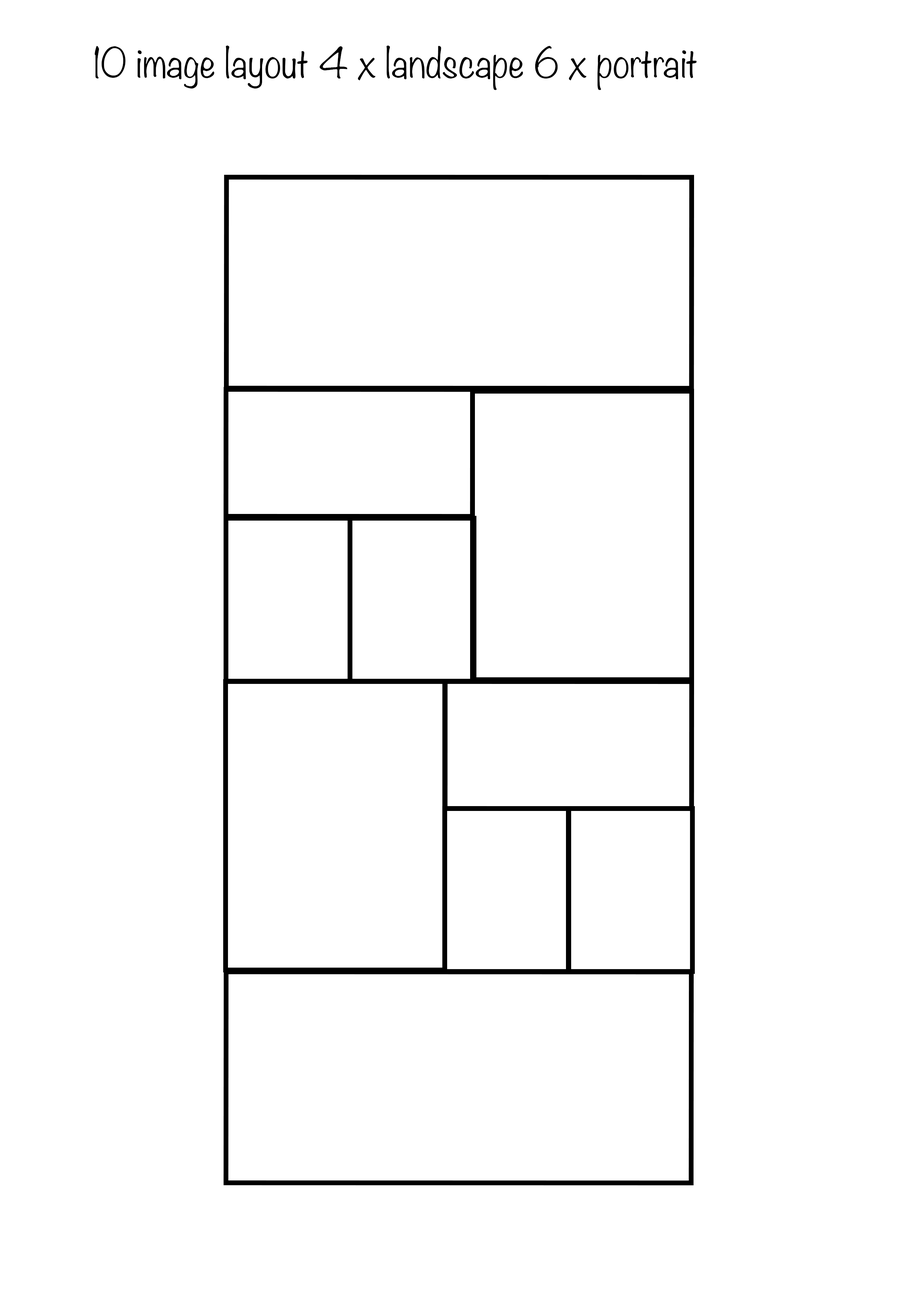
<style>
.page{position:relative;width:918px;height:1299px;background:#ffffff}
.page>*{position:absolute;margin:0}
.t1{font:37px "Noteworthy-Light";color:#000000}
</style>
<div class="page">
<p class="t1" style="left:95px;top:46px;width:602px;height:44px">10 image layout 4 x landscape 6 x portrait</p>
</div>
